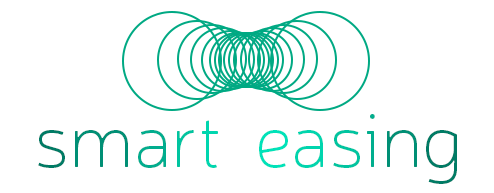
<style>
.page{position:relative;width:494px;height:193px;background:#ffffff}
.page>*{position:absolute;margin:0}
.t1{font:75px "Neris-Thin";color:#007b65}
.t2{font:75px "Neris-Thin";color:#008f75}
.t3{font:75px "Neris-Thin";color:#01ad8e}
.t4{font:75px "Neris-Thin";color:#00c4a0}
.t5{font:75px "Neris-Thin";color:#00d6af}
.t6{font:75px "Neris-Thin";color:#00e2b9}
.t7{font:75px "Neris-Thin";color:#00d5ae}
.t8{font:75px "Neris-Thin";color:#00ae8e}
</style>
<div class="page">
<p class="t1" style="left:38px;top:120px;width:180px;height:48px">s<span class="t2">m</span><span class="t3">a</span><span class="t4">r</span><span class="t5">t</span></p>
<p class="t6" style="left:259px;top:114px;width:198px;height:70px">e<span class="t7">a</span><span class="t4">s</span><span class="t8">i</span><span class="t2">n</span><span class="t1">g</span></p>
</div>
